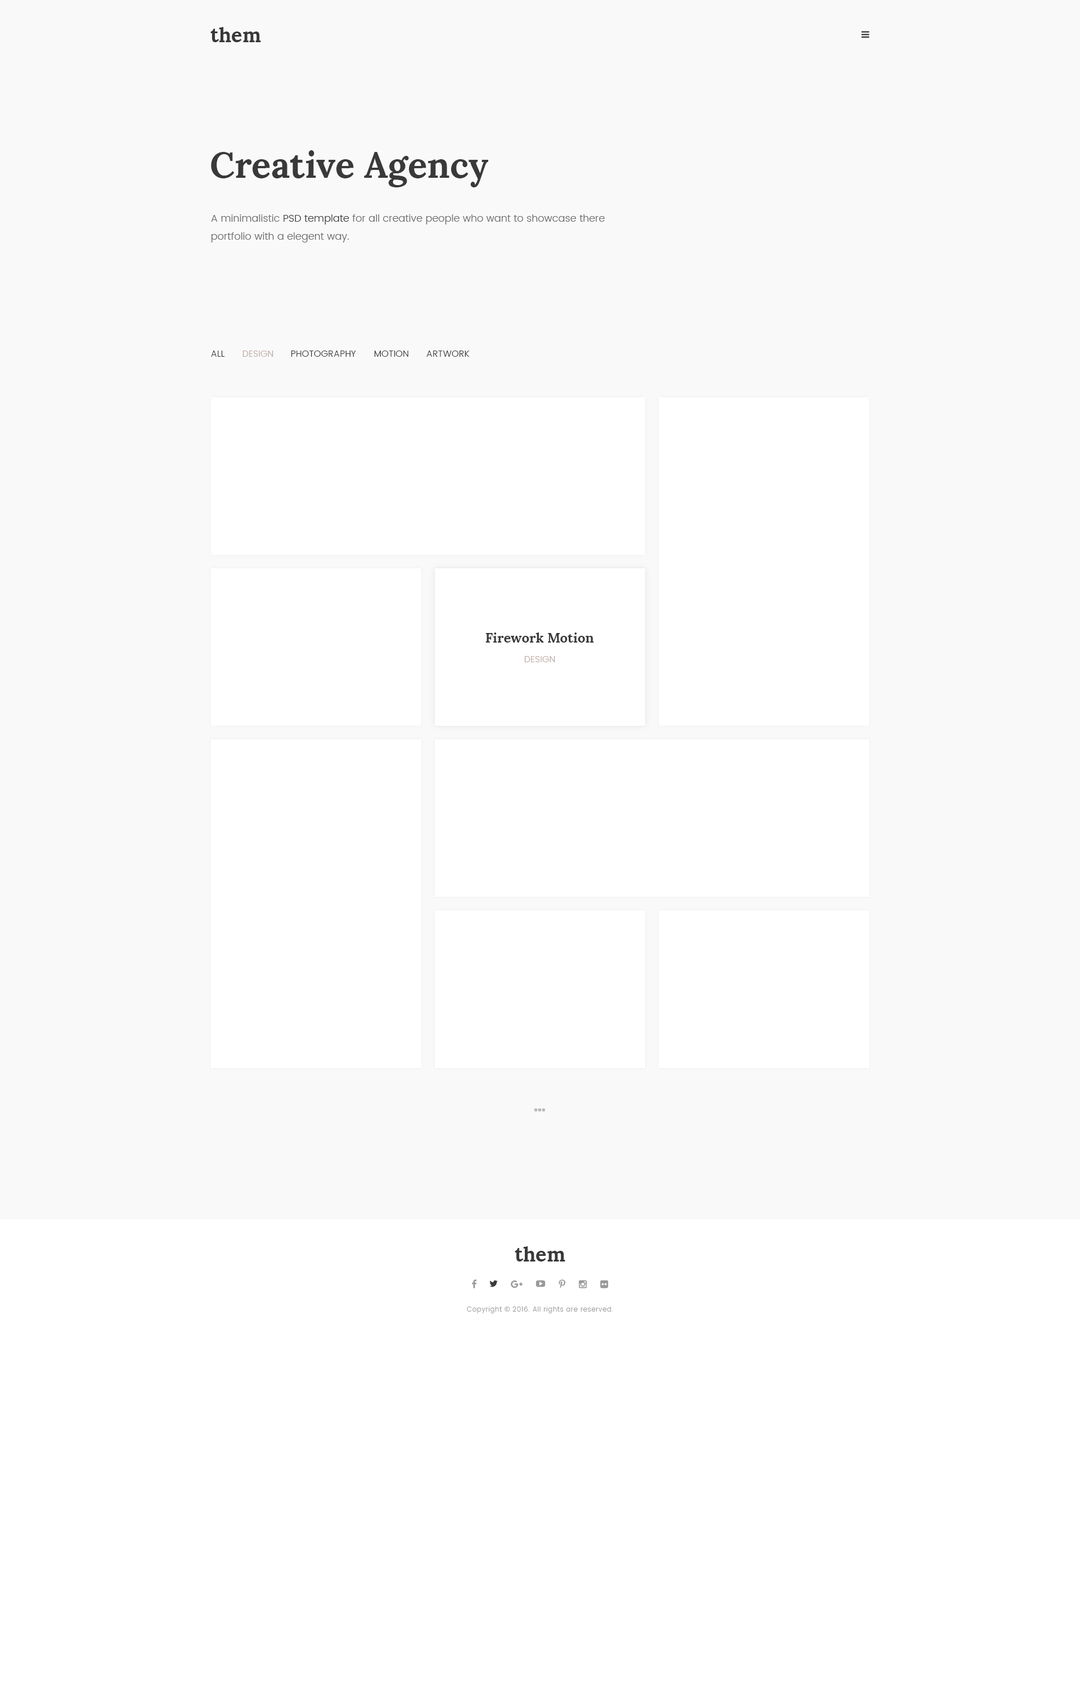
<style>
.page{position:relative;width:1080px;height:1688px;background:#ffffff}
.page>*{position:absolute;margin:0}
.t1{font:20.2px "Lora-Bold";color:#393939}
.t2{font:36px "Lora-Bold";color:#393939}
.t3{font:10.1px/18px "Poppins-Light";color:#696969}
.t4{font:10.1px/18px "Poppins-Light";color:#393939}
.t5{font:9px "Poppins-Light";letter-spacing:0.01em;color:#393939;text-transform:uppercase}
.t6{font:9px "Poppins-Light";letter-spacing:0.01em;color:#bcaaa4;text-transform:uppercase}
.t7{font:13.5px "Lora-Bold";color:#393939}
.t8{font:6.8px "Poppins-Light";letter-spacing:0.05em;color:#999999}
.t9{font:6.8px "OpenSans";letter-spacing:0.05em;color:#999999}
</style>
<div class="page">
<p class="t1" style="left:210px;top:27px;width:51px;height:15px">them</p>
<p class="t2" style="left:211px;top:150px;width:277px;height:37px">Creative Agency</p>
<p class="t3" style="left:211px;top:214px;width:394px;height:28px">A minimalistic <span class="t4">PSD template</span> for all creative people who want to showcase there portfolio with a elegent way.</p>
<p class="t5" style="left:211px;top:350px;width:14px;height:7px">All</p>
<p class="t6" style="left:242px;top:350px;width:31px;height:7px">Design</p>
<p class="t5" style="left:291px;top:350px;width:65px;height:7px">Photography</p>
<p class="t5" style="left:374px;top:350px;width:34px;height:7px">Motion</p>
<p class="t5" style="left:426px;top:350px;width:44px;height:7px">Artwork</p>
<p class="t7" style="left:485px;top:632px;width:109px;height:10px">Firework Motion</p>
<p class="t6" style="left:524px;top:656px;width:31px;height:6px">Design</p>
<p class="t1" style="left:515px;top:1246px;width:50px;height:15px">them</p>
<p class="t8" style="left:467px;top:1306px;width:146px;height:7px">Copyright <span class="t9">© </span>2016. All rights are reserved.</p>
</div>
